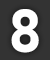
<style>
.page{position:relative;width:50px;height:60px;background:#333333}
.page>*{position:absolute;margin:0}
.t1{font:60px "Bahnschrift-Bold";color:#ffffff}
</style>
<div class="page">
<p class="t1" style="left:11px;top:9px;width:28px;height:44px">8</p>
</div>
